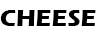
<style>
.page{position:relative;width:100px;height:35px;background:#ffffff}
.page>*{position:absolute;margin:0}
.t1{font:24px "ErasITC-Bold";color:#000000}
</style>
<div class="page">
<p class="t1" style="left:0px;top:10px;width:96px;height:16px">CHEESE</p>
</div>
